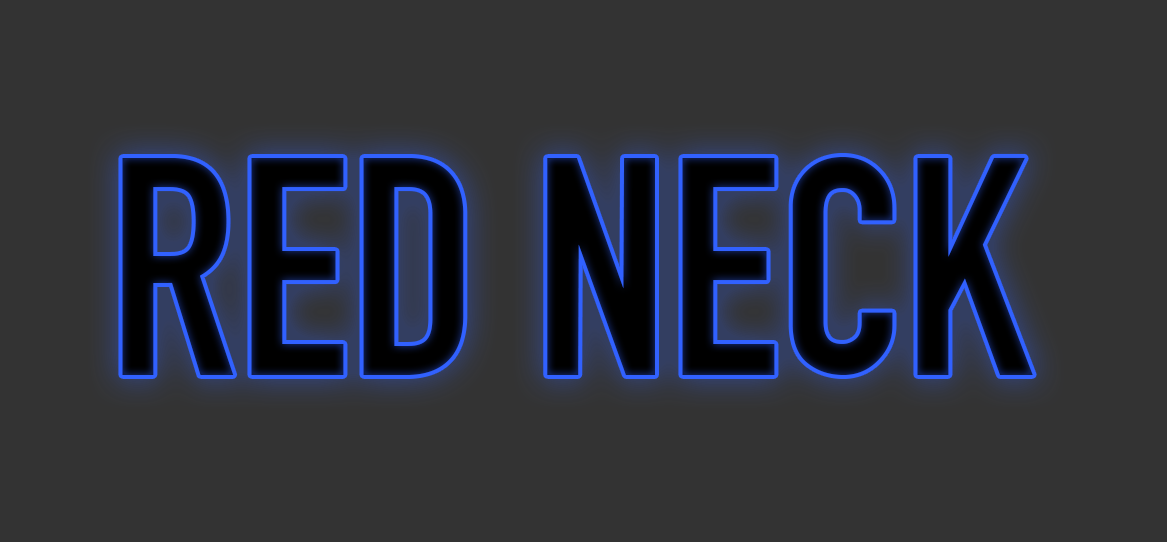
<style>
.page{position:relative;width:1167px;height:542px;background:#333333}
.page>*{position:absolute;margin:0}
.t1{font:302.5px "DINEngschrift";color:#010103}
</style>
<div class="page">
<p class="t1" style="left:122px;top:157px;width:911px;height:218px">RED NECK</p>
</div>
